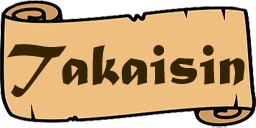
<style>
.page{position:relative;width:256px;height:128px;background:#efbf7f}
.page>*{position:absolute;margin:0}
.t1{font:60px "MaturaMTScriptCapitals";color:#352401}
</style>
<div class="page">
<p class="t1" style="left:7px;top:44px;width:238px;height:53px">Takaisin</p>
</div>
